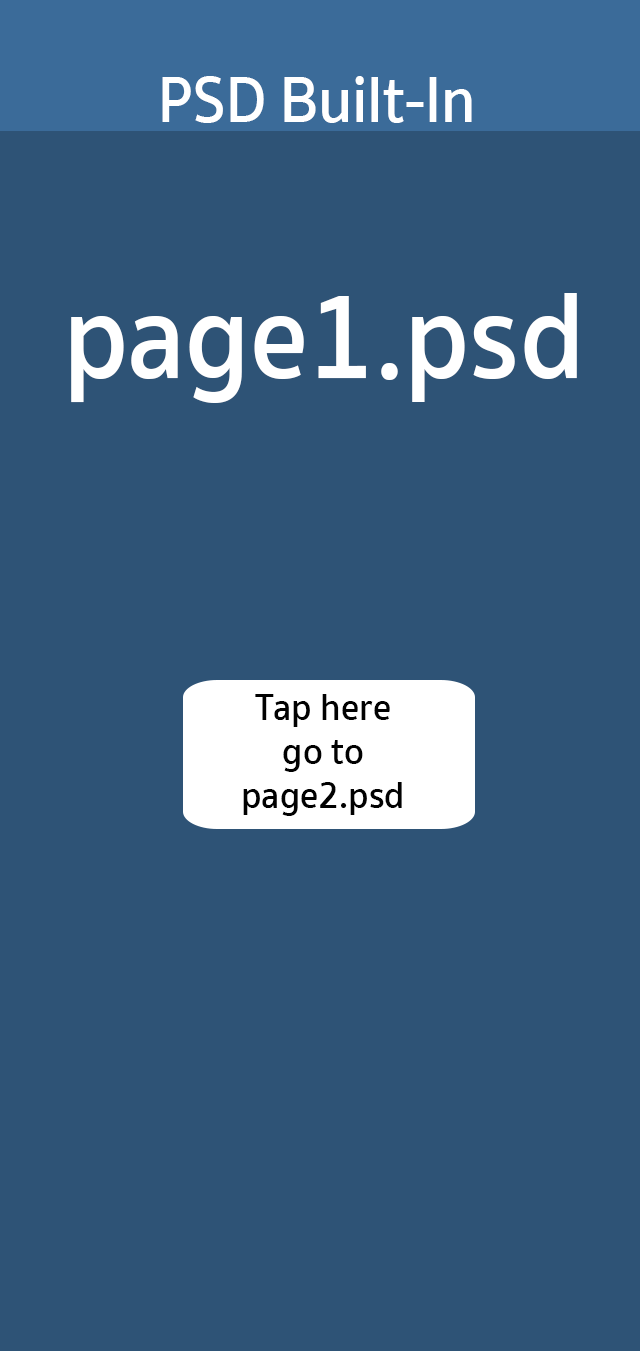
<style>
.page{position:relative;width:640px;height:1351px;background:#2e5376}
.page>*{position:absolute;margin:0}
.t1{font:66.6px "SukhumvitSet-SemiBold";color:#ffffff;scale:0.91 1}
.t2{font:125.8px "SukhumvitSet-SemiBold";color:#ffffff;scale:0.91 1}
.t3{font:39.4px/44px "SukhumvitSet-SemiBold";color:#010101;scale:0.91 1}
</style>
<div class="page">
<p class="t1" style="left:162px;top:76px;width:310px;height:47px">PSD Built-In</p>
<p class="t2" style="left:71px;top:293px;width:506px;height:110px">page1.psd</p>
<p class="t3" style="left:243px;top:694px;width:159px;height:122px;text-align:center">Tap here<br>go to<br>page2.psd</p>
</div>
